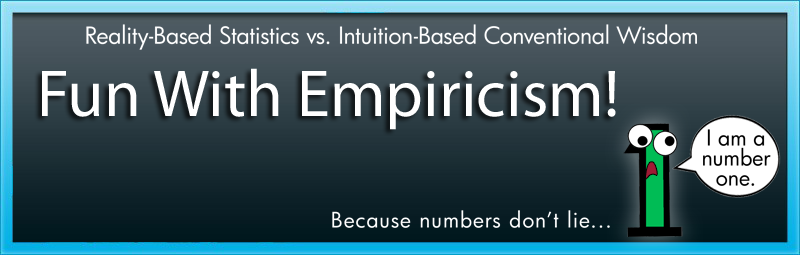
<style>
.page{position:relative;width:800px;height:255px}
.page>*{position:absolute;margin:0}
.t1{font:22.9px "FuturaBk";letter-spacing:-0.01em;color:#ffffff}
.t2{font:66.7px "MyriadPro-Regular";color:#ffffff}
.t3{font:21.3px/20px "FuturaBk";color:#000000}
.t4{font:20.8px "FuturaBk";letter-spacing:0.05em;color:#ffffff}
</style>
<div class="page">
<p class="t1" style="left:86px;top:24px;width:611px;height:26px">Reality-Based Statistics vs. Intuition-Based Conventional Wisdom</p>
<p class="t2" style="left:42px;top:68px;width:574px;height:62px">Fun With Empiricism!</p>
<p class="t3" style="left:703px;top:129px;width:68px;height:57px;text-align:center">I am a <br>number <br>one.</p>
<p class="t4" style="left:332px;top:210px;width:278px;height:18px">Because numbers don’t lie...</p>
</div>
